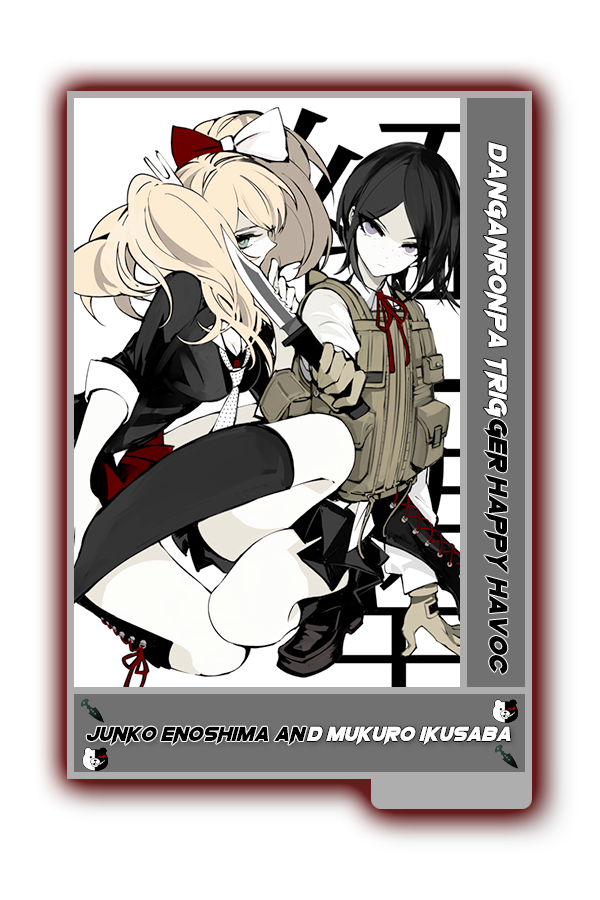
<style>
.page{position:relative;width:600px;height:900px;background:#ffffff}
.page>*{position:absolute;margin:0}
.t1{font:26.6px "KnifePrincess";color:#ffffff}
.t2{font:26.6px "KnifePrincess";color:#000000}
.t3{font:20.9px "KnifePrincess";color:#000000}
.t4{font:20.9px "KnifePrincess";color:#ffffff}
</style>
<div class="page">
<p class="t1" style="left:483px;top:142px;width:24px;height:276px;rotate:90deg">DANGANRONPA TRIG</p>
<p class="t2" style="left:484px;top:419px;width:24px;height:255px;rotate:90deg">GER HAPPY HAVOC</p>
<p class="t3" style="left:86px;top:726px;width:221px;height:19px">JUNKO ENOSHIMA AN</p>
<p class="t4" style="left:306px;top:726px;width:205px;height:19px">D MUKURO IKUSABA</p>
</div>
